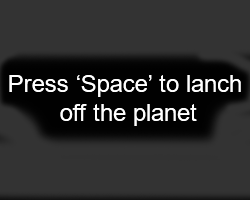
<style>
.page{position:relative;width:250px;height:200px;background:#333333}
.page>*{position:absolute;margin:0}
.t1{font:24px "ArialMT";color:#ffffff}
</style>
<div class="page">
<p class="t1" style="left:9px;top:75px;width:232px;height:51px;text-align:center">Press ‘Space’ to lanch <br>off the planet</p>
</div>
